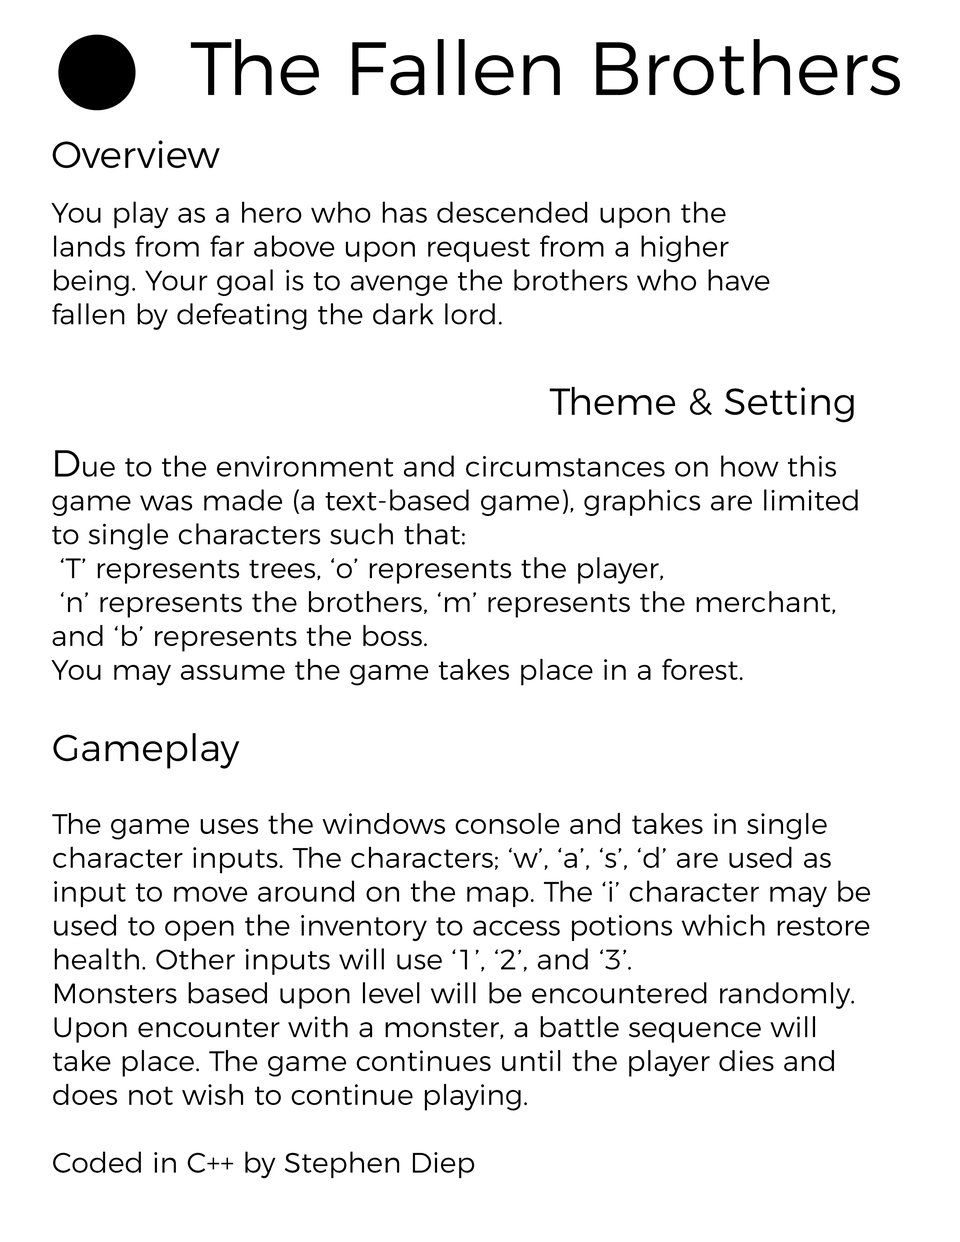
<style>
.page{position:relative;width:960px;height:1242px;background:#ffffff}
.page>*{position:absolute;margin:0}
.t1{font:75.3px "Montserrat-Light";color:#000000}
.t2{font:37.6px "Montserrat-Light";color:#000000}
.t3{font:28.2px "Montserrat-Light";color:#000000}
</style>
<div class="page">
<p class="t1" style="left:191px;top:39px;width:709px;height:56px">The Fallen Brothers</p>
<p class="t2" style="left:53px;top:140px;width:167px;height:28px">Overview</p>
<p class="t3" style="left:51px;top:202px;width:718px;height:128px">You play as a hero who has descended upon the lands from far above upon request from a higher being. Your goal is to avenge the brothers who have fallen by defeating the dark lord.</p>
<p class="t2" style="left:550px;top:387px;width:304px;height:35px">Theme &amp; Setting</p>
<p class="t3" style="left:51px;top:450px;width:807px;height:235px"><span class="t2">D</span>ue to the environment and circumstances on how this game was made (a text-based game), graphics are limited to single characters such that:<br> ‘T’ represents trees, ‘o’ represents the player,<br> ‘n’ represents the brothers, ‘m’ represents the merchant, and ‘b’ represents the boss. <br>You may assume the game takes place in a forest.</p>
<p class="t2" style="left:53px;top:733px;width:186px;height:36px">Gameplay</p>
<p class="t3" style="left:52px;top:813px;width:818px;height:366px">The game uses the windows console and takes in single character inputs. The characters; ‘w’, ‘a’, ‘s’, ‘d’ are used as input to move around on the map. The ‘i’ character may be used to open the inventory to access potions which restore health. Other inputs will use ‘1’, ‘2’, and ‘3’.<br>Monsters based upon level will be encountered randomly. <br>Upon encounter with a monster, a battle sequence will take place. The game continues until the player dies and does not wish to continue playing.<br><br>Coded in C++ by Stephen Diep</p>
</div>
